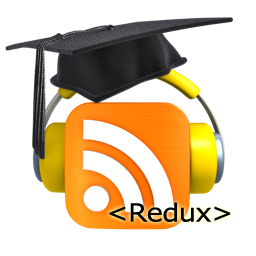
<style>
.page{position:relative;width:256px;height:256px;background:#ffffff}
.page>*{position:absolute;margin:0}
.t1{font:25px "Verdana";letter-spacing:-0.025em;color:#000000;scale:1.1 1}
</style>
<div class="page">
<p class="t1" style="left:109px;top:202px;width:122px;height:20px">&lt;Redux&gt;</p>
</div>
